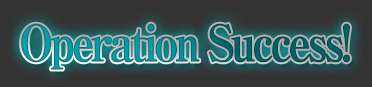
<style>
.page{position:relative;width:372px;height:87px;background:#333333}
.page>*{position:absolute;margin:0}
.t1{font:50px "RyuminPro-ExBold";letter-spacing:-0.08em;scale:0.9 1}
</style>
<div class="page">
<p class="t1" style="left:21px;top:23px;width:329px;height:47px">Operation Success!</p>
</div>
